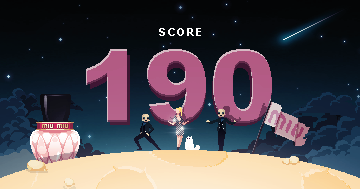
<style>
.page{position:relative;width:360px;height:189px}
.page>*{position:absolute;margin:0}
.t1{font:11px "Arial-BoldMT";letter-spacing:0.16em;color:#ffffff;text-transform:uppercase}
.t2{font:101.4px "Arial-Black";letter-spacing:-0.04em;color:#b45e87;text-transform:uppercase}
.t3{font:97.2px "Arial-Black";letter-spacing:-0.04em;color:#b35c86;text-transform:uppercase}
</style>
<div class="page">
<p class="t1" style="left:159px;top:28px;width:42px;height:8px">score</p>
<p class="t2" style="left:86px;top:49px;width:186px;height:74px">190</p>
<p class="t3" style="left:90px;top:55px;width:179px;height:71px">190</p>
</div>
